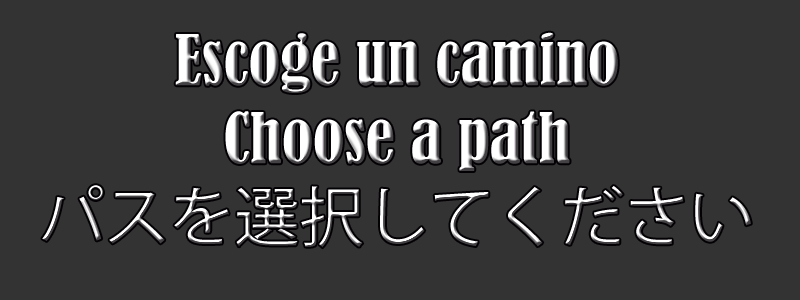
<style>
.page{position:relative;width:800px;height:300px;background:#333333}
.page>*{position:absolute;margin:0}
.t1{font:65px "BernardMT-Condensed"}
.t2{font:65px "KozGoPr6N-Regular"}
</style>
<div class="page">
<p class="t1" style="left:42px;top:32px;width:709px;height:216px;text-align:center">Escoge un camino<br>Choose a path<br><span class="t2">パスを選択してください</span></p>
</div>
